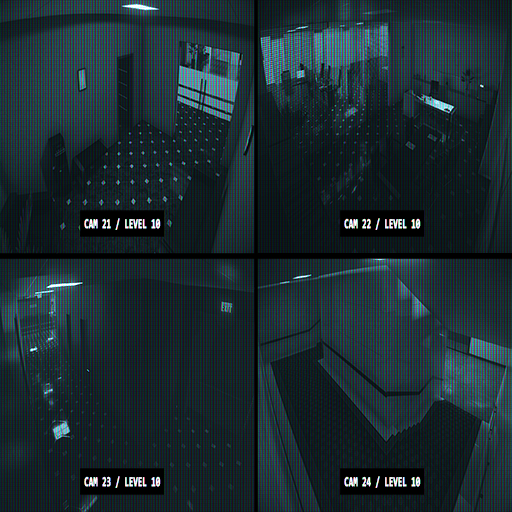
<style>
.page{position:relative;width:512px;height:512px}
.page>*{position:absolute;margin:0}
.t1{font:13.7px "Consolas-Bold";color:#ffffff;font-weight:bold;scale:0.56 1}
</style>
<div class="page">
<p class="t1" style="left:84px;top:218px;width:77px;height:12px">CAM 21 / LEVEL 10</p>
<p class="t1" style="left:344px;top:218px;width:77px;height:12px">CAM 22 / LEVEL 10</p>
<p class="t1" style="left:84px;top:476px;width:77px;height:12px">CAM 23 / LEVEL 10</p>
<p class="t1" style="left:344px;top:476px;width:77px;height:12px">CAM 24 / LEVEL 10</p>
</div>
